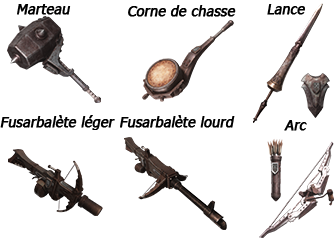
<style>
.page{position:relative;width:334px;height:240px;background:#ffffff}
.page>*{position:absolute;margin:0}
.t1{font:14px "Tahoma";color:#000000;font-weight:bold;font-style:italic}
</style>
<div class="page">
<p class="t1" style="left:17px;top:4px;width:54px;height:11px">Marteau</p>
<p class="t1" style="left:128px;top:5px;width:108px;height:12px">Corne de chasse</p>
<p class="t1" style="left:267px;top:4px;width:38px;height:11px">Lance</p>
<p class="t1" style="left:0px;top:115px;width:115px;height:15px">Fusarbalète léger</p>
<p class="t1" style="left:120px;top:115px;width:115px;height:13px">Fusarbalète lourd</p>
<p class="t1" style="left:284px;top:120px;width:23px;height:11px">Arc</p>
</div>
